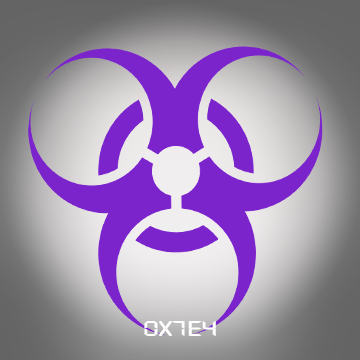
<style>
.page{position:relative;width:360px;height:360px}
.page>*{position:absolute;margin:0}
.t1{font:20.7px "DigifaceWide";color:#ffffff}
</style>
<div class="page">
<p class="t1" style="left:144px;top:321px;width:72px;height:15px">0x7e4</p>
</div>
